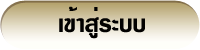
<style>
.page{position:relative;width:200px;height:50px}
.page>*{position:absolute;margin:0}
.t1{font:33.3px "DSNLardPhrao";color:#020100}
</style>
<div class="page">
<p class="t1" style="left:59px;top:6px;width:86px;height:33px">เข้าสู่ระบบ</p>
</div>
